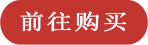
<style>
.page{position:relative;width:148px;height:45px;background:#c3352f}
.page>*{position:absolute;margin:0}
.t1{font:21.2px "SimSun";letter-spacing:0.085em;color:#ffffff;font-weight:bold;scale:1.18 1}
</style>
<div class="page">
<p class="t1" style="left:20px;top:11px;width:107px;height:21px">前往购买</p>
</div>
